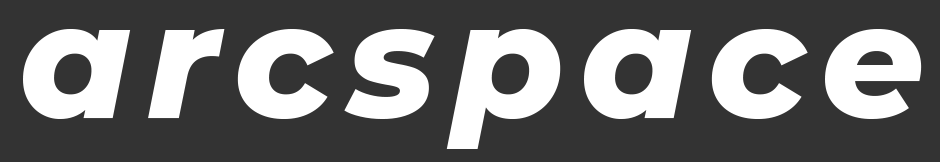
<style>
.page{position:relative;width:940px;height:162px;background:#333333}
.page>*{position:absolute;margin:0}
.t1{font:161.9px "Montserrat-ExtraBoldItalic";letter-spacing:0.1em;color:#ffffff}
</style>
<div class="page">
<p class="t1" style="left:23px;top:29px;width:899px;height:120px">arcspace</p>
</div>
